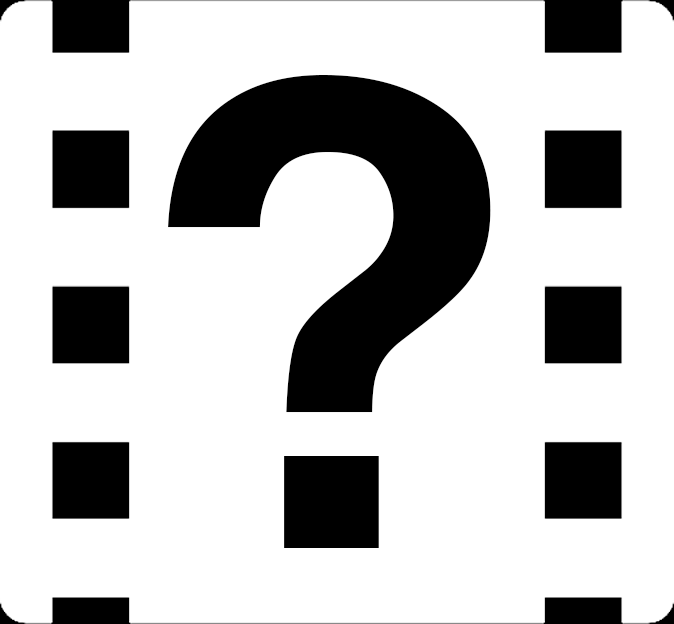
<style>
.page{position:relative;width:674px;height:624px;background:#ffffff}
.page>*{position:absolute;margin:0}
.t1{font:650.7px "Helvetica-Bold";color:#000000}
</style>
<div class="page">
<p class="t1" style="left:168px;top:75px;width:323px;height:473px">?</p>
</div>
